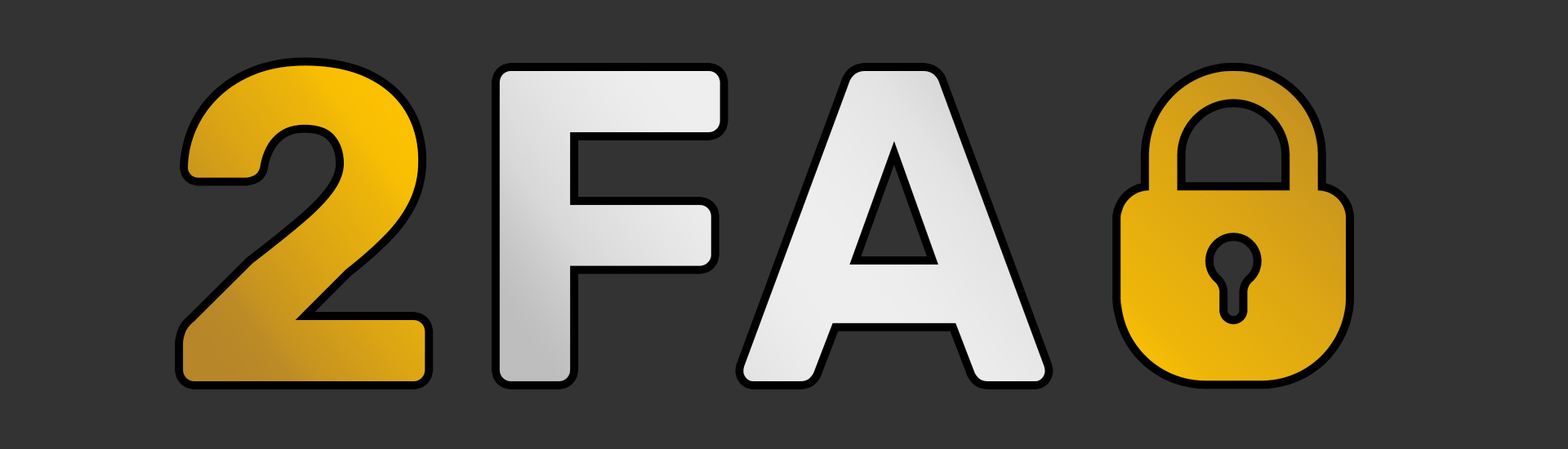
<style>
.page{position:relative;width:1568px;height:449px;background:#333333}
.page>*{position:absolute;margin:0}
.t1{font:441px "Rubik-SemiBold";letter-spacing:0.02em;font-weight:bold}
.t2{font:441px "Rubik-SemiBold";letter-spacing:0.02em;color:#e6e6e6;font-weight:bold}
</style>
<div class="page">
<p class="t1" style="left:183px;top:65px;width:242px;height:316px">2</p>
<p class="t2" style="left:499px;top:71px;width:546px;height:310px">FA</p>
</div>
